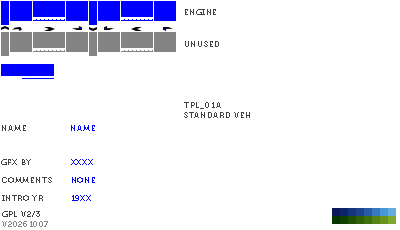
<style>
.page{position:relative;width:400px;height:230px;background:#ffffff}
.page>*{position:absolute;margin:0}
.t1{font:8px "Museo700-Regular";letter-spacing:0.075em;color:#404040;text-transform:uppercase}
.t2{font:8px "Museo700-Regular";letter-spacing:0.075em;color:#0000ff;text-transform:uppercase}
.t3{font:8px "Museo700-Regular";letter-spacing:0.075em;color:#848484;text-transform:uppercase}
</style>
<div class="page">
<p class="t1" style="left:185px;top:9px;width:31px;height:6px">engine</p>
<p class="t1" style="left:185px;top:41px;width:34px;height:6px">unused</p>
<p class="t1" style="left:184px;top:102px;width:66px;height:16px">tpl_01a<br>standard veh</p>
<p class="t1" style="left:2px;top:125px;width:24px;height:6px">name</p>
<p class="t2" style="left:71px;top:125px;width:24px;height:6px">name</p>
<p class="t1" style="left:1px;top:159px;width:30px;height:6px">gfx by</p>
<p class="t2" style="left:71px;top:159px;width:22px;height:6px">xxxx</p>
<p class="t1" style="left:2px;top:177px;width:50px;height:6px">comments</p>
<p class="t2" style="left:72px;top:177px;width:23px;height:6px">none</p>
<p class="t1" style="left:2px;top:195px;width:41px;height:6px">intro yr</p>
<p class="t2" style="left:72px;top:195px;width:19px;height:6px">19xx</p>
<p class="t3" style="left:2px;top:221px;width:46px;height:6px">v20261007</p>
<p class="t1" style="left:2px;top:211px;width:38px;height:6px">gpl v2/3</p>
</div>
